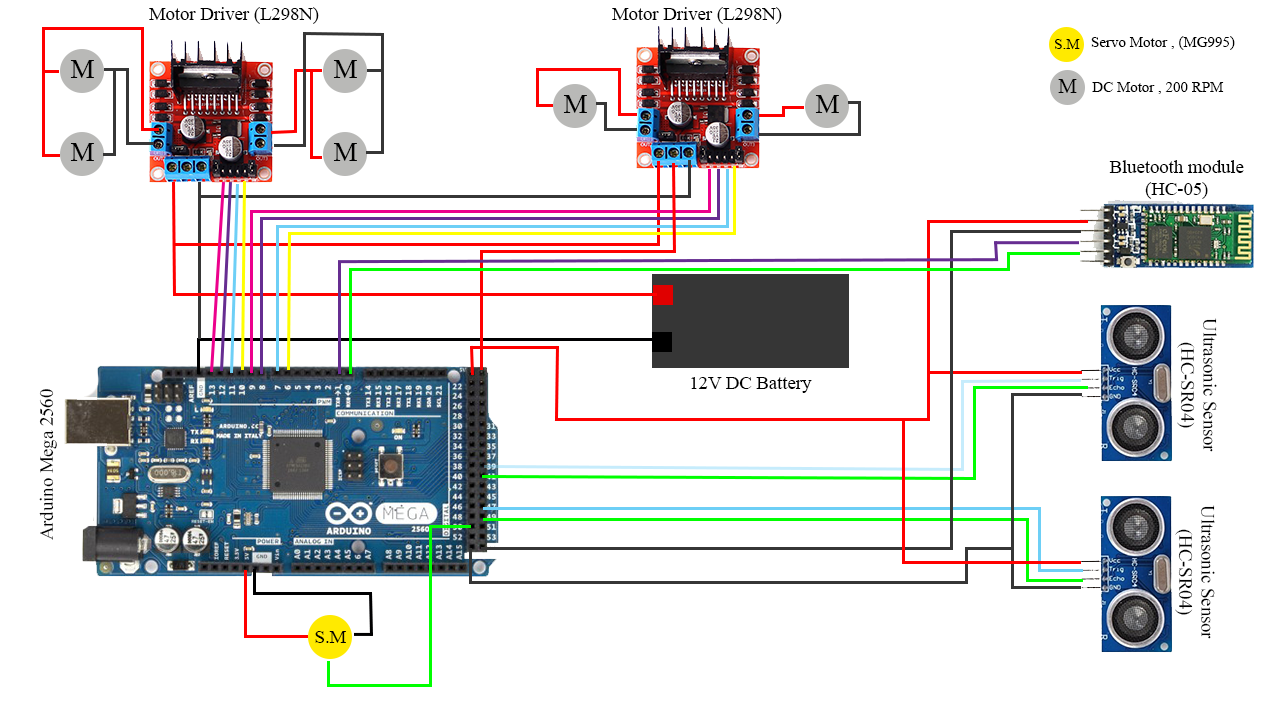
<style>
.page{position:relative;width:1280px;height:720px;background:#ffffff}
.page>*{position:absolute;margin:0}
.t1{font:18.7px "TimesNewRomanPSMT";color:#000000}
.t2{font:15px "TimesNewRomanPSMT";color:#000000}
.t3{font:26.7px "TimesNewRomanPSMT";color:#000000}
.t4{font:21.5px "TimesNewRomanPSMT";color:#000000}
</style>
<div class="page">
<p class="t1" style="left:149px;top:7px;width:170px;height:17px">Motor Driver (L298N)</p>
<p class="t1" style="left:612px;top:7px;width:170px;height:17px">Motor Driver (L298N)</p>
<p class="t2" style="left:1055px;top:39px;width:25px;height:10px">S.M</p>
<p class="t2" style="left:1091px;top:36px;width:144px;height:14px">Servo Motor , (MG995)</p>
<p class="t3" style="left:70px;top:60px;width:24px;height:18px">M</p>
<p class="t3" style="left:333px;top:60px;width:24px;height:18px">M</p>
<p class="t4" style="left:1058px;top:79px;width:19px;height:14px">M</p>
<p class="t2" style="left:1092px;top:82px;width:132px;height:12px">DC Motor , 200 RPM</p>
<p class="t3" style="left:563px;top:95px;width:24px;height:18px">M</p>
<p class="t3" style="left:815px;top:95px;width:24px;height:18px">M</p>
<p class="t3" style="left:70px;top:143px;width:24px;height:18px">M</p>
<p class="t3" style="left:333px;top:143px;width:24px;height:18px">M</p>
<p class="t1" style="left:1109px;top:160px;width:135px;height:39px;text-align:center">Bluetooth module<br>(HC-05)</p>
<p class="t1" style="left:1177px;top:318px;width:40px;height:134px;text-align:center;rotate:90deg">Ultrasonic Sensor<br>(HC-SR04)</p>
<p class="t1" style="left:691px;top:377px;width:121px;height:16px">12V DC Battery</p>
<p class="t1" style="left:39px;top:389px;width:18px;height:151px;rotate:-90deg">Arduino Mega 2560</p>
<p class="t1" style="left:1175px;top:505px;width:40px;height:134px;text-align:center;rotate:90deg">Ultrasonic Sensor<br>(HC-SR04)</p>
<p class="t1" style="left:315px;top:631px;width:31px;height:12px">S.M</p>
</div>
